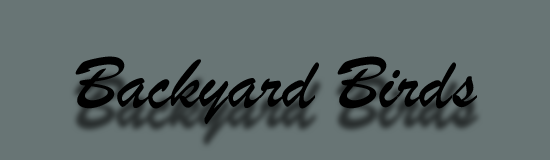
<style>
.page{position:relative;width:550px;height:160px;background:#687575}
.page>*{position:absolute;margin:0}
.t1{font:77.4px "BrushScriptMT";color:#000000}
</style>
<div class="page">
<p class="t1" style="left:75px;top:56px;width:402px;height:69px">Backyard Birds</p>
</div>
